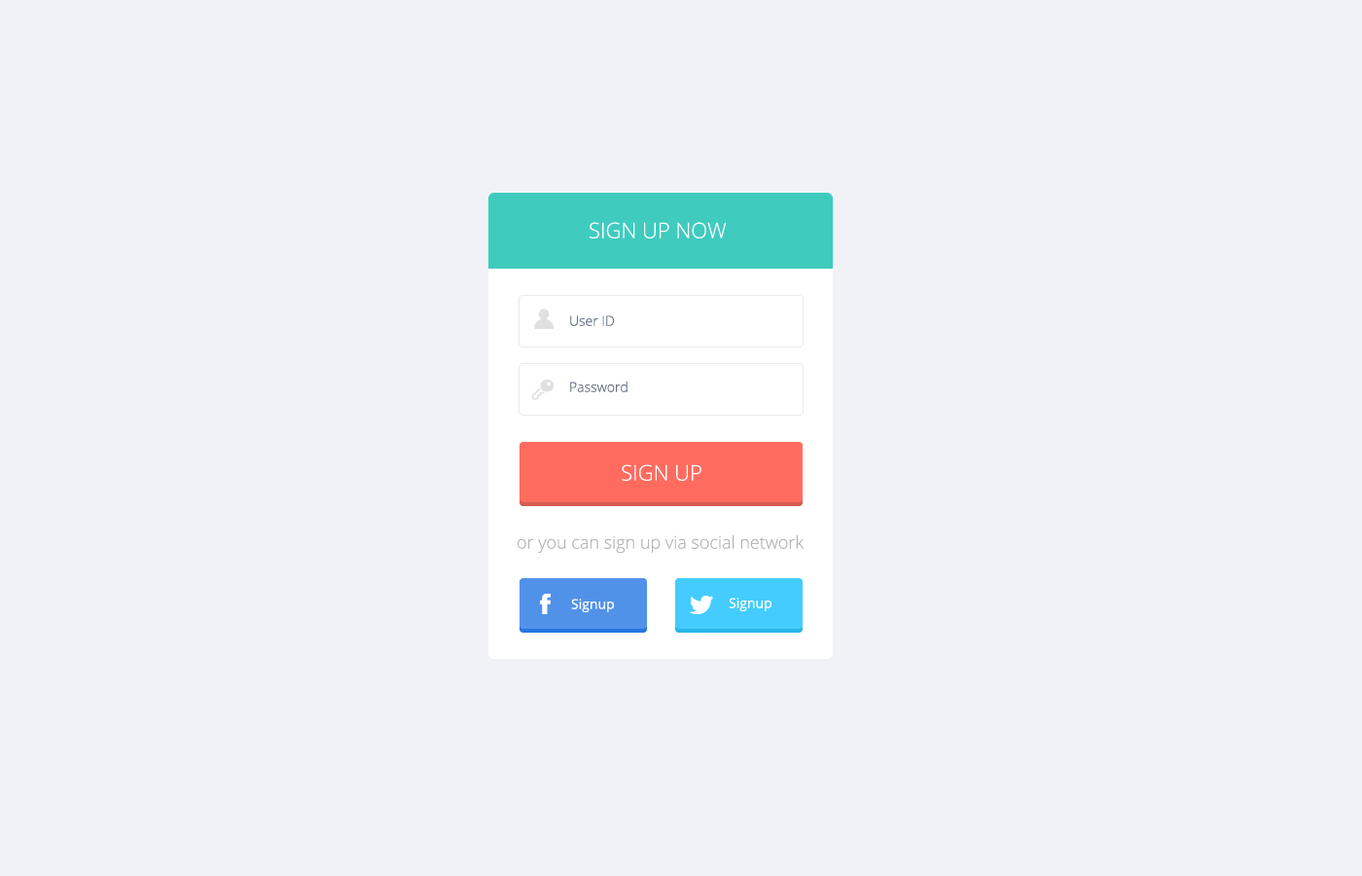
<style>
.page{position:relative;width:1362px;height:876px;background:#f0f2f7}
.page>*{position:absolute;margin:0}
.t1{font:21.4px "OpenSans-Light";color:#ffffff}
.t2{font:13.6px "OpenSans-Light";color:#626f81}
.t3{font:17.5px "OpenSans-Light";color:#b5b6b6}
.t4{font:13.6px "OpenSans";color:#ffffff}
</style>
<div class="page">
<p class="t1" style="left:590px;top:222px;width:137px;height:16px">SIGN UP NOW</p>
<p class="t2" style="left:570px;top:315px;width:44px;height:11px">User ID</p>
<p class="t2" style="left:570px;top:380px;width:57px;height:12px">Password</p>
<p class="t1" style="left:622px;top:464px;width:79px;height:17px">SIGN UP</p>
<p class="t3" style="left:518px;top:534px;width:287px;height:19px">or you can sign up via social network</p>
<p class="t4" style="left:571px;top:598px;width:43px;height:14px">Signup</p>
<p class="t4" style="left:729px;top:597px;width:42px;height:14px">Signup</p>
</div>
